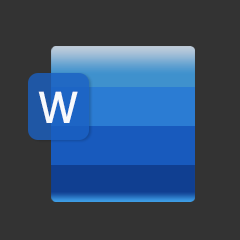
<style>
.page{position:relative;width:240px;height:240px;background:#333333}
.page>*{position:absolute;margin:0}
.t1{font:45px "Poppins-Medium";letter-spacing:0.02em;color:#f8fafc;text-transform:uppercase;scale:0.9 1}
</style>
<div class="page">
<p class="t1" style="left:38px;top:91px;width:40px;height:32px">w</p>
</div>
